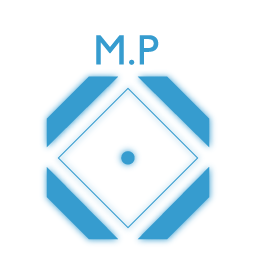
<style>
.page{position:relative;width:256px;height:256px;background:#ffffff}
.page>*{position:absolute;margin:0}
.t1{font:42.7px "GillSansMT";letter-spacing:0.01em;color:#369ccf}
</style>
<div class="page">
<p class="t1" style="left:96px;top:35px;width:63px;height:30px">M.P</p>
</div>
